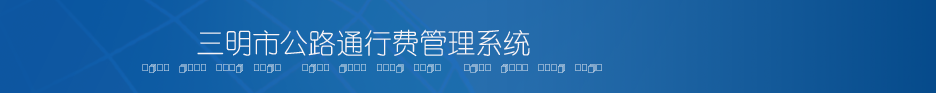
<style>
.page{position:relative;width:936px;height:93px}
.page>*{position:absolute;margin:0}
.t1{font:27.9px "YouYuan";color:#f9f4f6}
</style>
<div class="page">
<p class="t1" style="left:197px;top:29px;width:333px;height:28px">三明市公路通行费管理系统</p>
</div>
